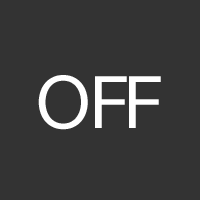
<style>
.page{position:relative;width:200px;height:200px;background:#333333}
.page>*{position:absolute;margin:0}
.t1{font:72px "ClementePDag-Book";color:#ffffff}
</style>
<div class="page">
<p class="t1" style="left:38px;top:75px;width:123px;height:55px">OFF</p>
</div>
